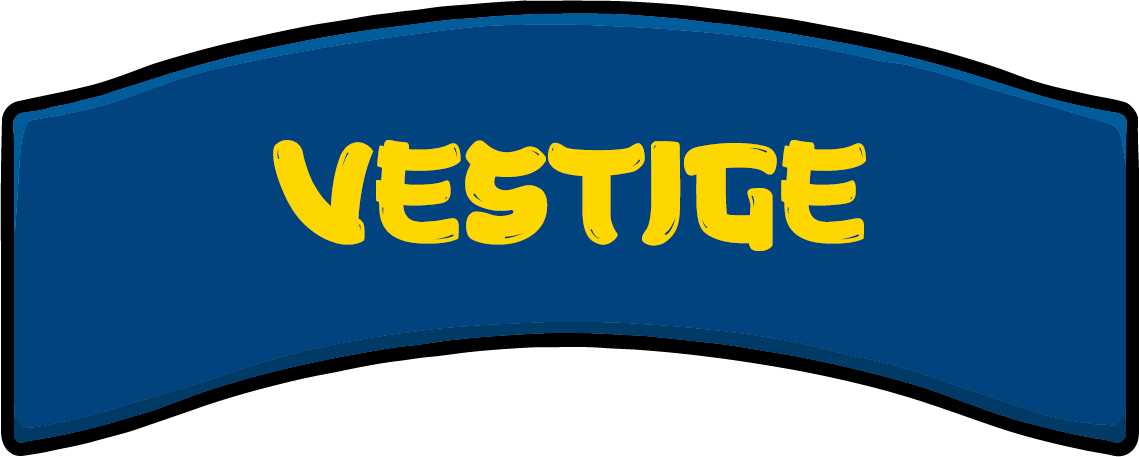
<style>
.page{position:relative;width:1139px;height:457px;background:#00437f}
.page>*{position:absolute;margin:0}
.t1{font:150px "SamuraiBlastRegular";color:#ffd700}
</style>
<div class="page">
<p class="t1" style="left:273px;top:140px;width:593px;height:111px">VESTIGE</p>
</div>
